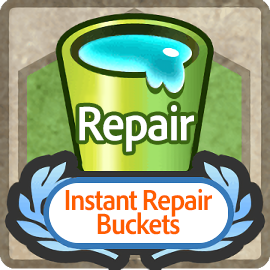
<style>
.page{position:relative;width:270px;height:270px}
.page>*{position:absolute;margin:0}
.t1{font:50px "AdobeClean-Bold";letter-spacing:-0.04em;color:#ffffff;scale:0.9 1}
.t2{font:30px/24px "AdobeClean-Bold";letter-spacing:-0.04em;color:#ff5d00;scale:0.9 1}
</style>
<div class="page">
<p class="t1" style="left:79px;top:105px;width:115px;height:47px">Repair</p>
<p class="t2" style="left:65px;top:188px;width:147px;height:47px;text-align:center">Instant Repair<br>Buckets</p>
</div>
